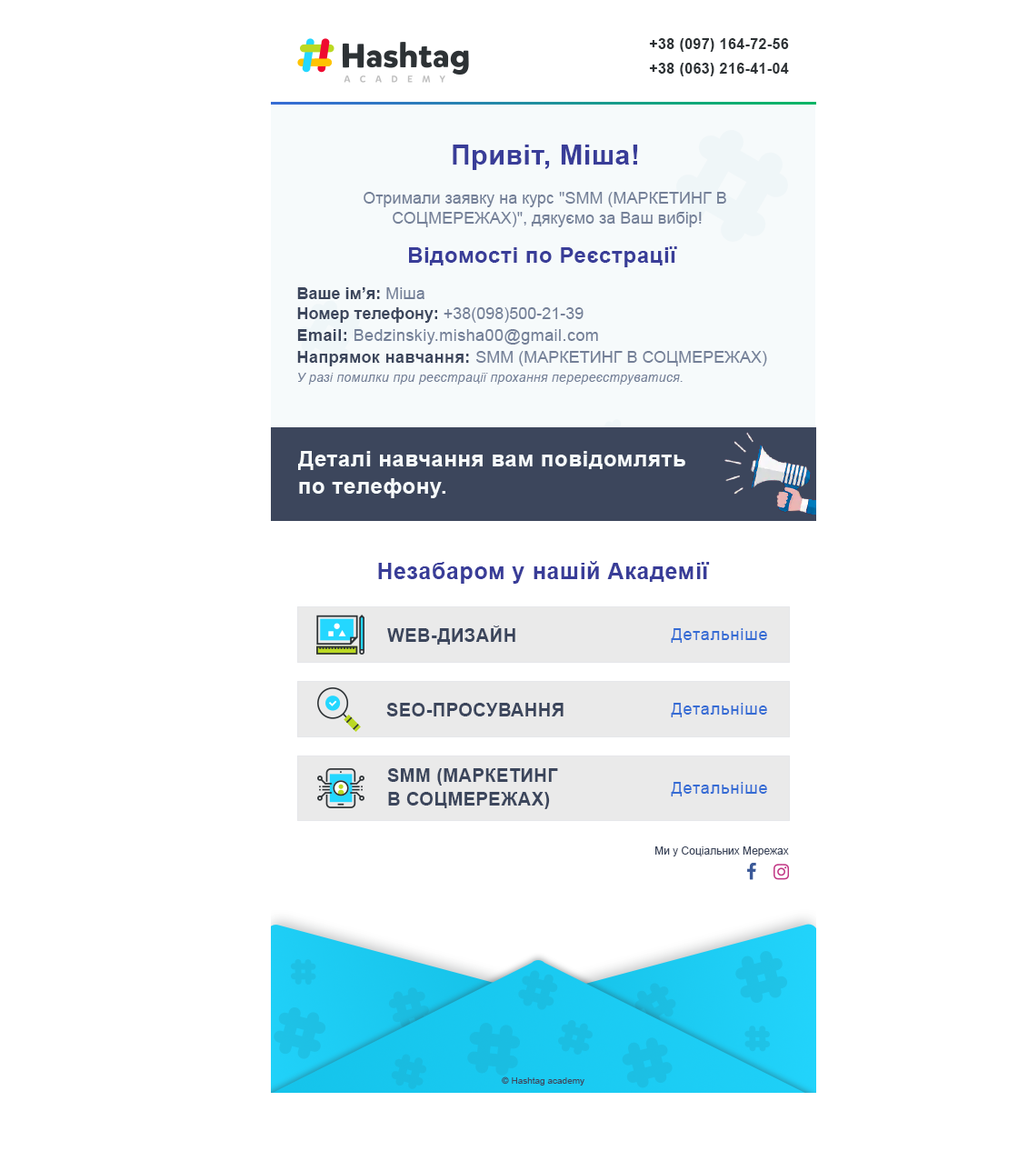
<style>
.page{position:relative;width:1018px;height:1171px;background:#ffffff}
.page>*{position:absolute;margin:0}
.t1{font:14.5px "Arial-BoldMT";letter-spacing:0.025em;color:#2d3235}
.t2{font:27.3px "Arial-BoldMT";letter-spacing:0.025em;color:#393d98}
.t3{font:16.4px "ArialMT";color:#748098}
.t4{font:21.8px "Arial-BoldMT";letter-spacing:0.025em;color:#393d98}
.t5{font:12.7px/19.1px "Arial-ItalicMT";letter-spacing:0.025em;color:#748098}
.t6{font:16.4px "Arial-BoldMT";color:#3c465c}
.t7{font:16.4px/19.1px "Arial-BoldMT";letter-spacing:0.025em;color:#3c465c}
.t8{font:16.4px/21.8px "ArialMT";letter-spacing:0.025em;color:#748098}
.t9{font:16.4px/21.8px "ArialMT";color:#748098}
.t10{font:21.8px/27.3px "Arial-BoldMT";letter-spacing:0.025em;color:#f6fafb}
.t11{font:22.7px "Arial-BoldMT";letter-spacing:0.025em;color:#393d98}
.t12{font:18.2px "Arial-BoldMT";letter-spacing:0.025em;color:#3c465c}
.t13{font:16.4px "ArialMT";letter-spacing:0.05em;color:#366cd4}
.t14{font:18.2px/23.6px "Arial-BoldMT";letter-spacing:0.025em;color:#3c465c}
.t15{font:10.9px "ArialMT";color:#3c465c}
.t16{font:9.1px "ArialMT";color:#3c465c}
</style>
<div class="page">
<p class="t1" style="left:649px;top:38px;width:140px;height:14px">+38 (097) 164-72-56</p>
<p class="t1" style="left:649px;top:63px;width:140px;height:13px">+38 (063) 216-41-04</p>
<p class="t2" style="left:453px;top:145px;width:185px;height:25px">Привіт, Міша!</p>
<p class="t3" style="left:364px;top:192px;width:362px;height:35px;text-align:center">Отримали заявку на курс "SMM (МАРКЕТИНГ В <br>СОЦМЕРЕЖАХ)", дякуємо за Ваш вибір!</p>
<p class="t4" style="left:409px;top:246px;width:268px;height:21px">Відомості по Реєстрації</p>
<p class="t5" style="left:297px;top:287px;width:470px;height:98px"><span class="t6">Ваше ім’я: </span><span class="t3">Міша<br></span><span class="t6">Номер телефону: </span><span class="t3">+38(098)500-21-39<br></span><span class="t7">Email: </span><span class="t8">Bedzinskiy.misha00@gmail.com<br></span><span class="t7">Напрямок навчання: </span><span class="t9">SMM (МАРКЕТИНГ В СОЦМЕРЕЖАХ)<br></span>У разі помилки при реєстрації прохання перереєструватися.</p>
<p class="t10" style="left:298px;top:451px;width:388px;height:47px">Деталі навчання вам повідомлять <br>по телефону.</p>
<p class="t11" style="left:378px;top:561px;width:332px;height:23px">Незабаром у нашій Академії</p>
<p class="t12" style="left:387px;top:626px;width:129px;height:19px">WEB-ДИЗАЙН</p>
<p class="t13" style="left:671px;top:628px;width:96px;height:15px">Детальніше</p>
<p class="t12" style="left:386px;top:703px;width:178px;height:13px">SEO-ПРОСУВАННЯ</p>
<p class="t13" style="left:671px;top:703px;width:96px;height:14px">Детальніше</p>
<p class="t14" style="left:387px;top:768px;width:171px;height:41px">SMM (МАРКЕТИНГ<br>В СОЦМЕРЕЖАХ)</p>
<p class="t13" style="left:671px;top:782px;width:96px;height:14px">Детальніше</p>
<p class="t15" style="left:656px;top:846px;width:133px;height:10px">Ми у Соціальних Мережах</p>
<p class="t16" style="left:502px;top:1076px;width:83px;height:10px">© Hashtag academy</p>
</div>
